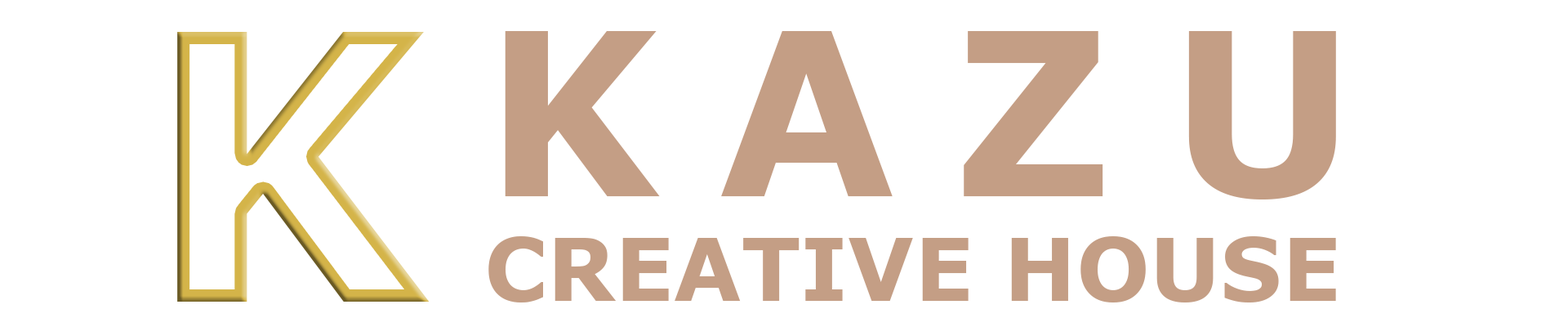
<style>
.page{position:relative;width:1568px;height:327px;background:#ffffff}
.page>*{position:absolute;margin:0}
.t1{font:370.9px "Verdana-Bold"}
.t2{font:86.8px "Verdana-Bold";color:#c49e85}
.t3{font:227.3px "Verdana-Bold";letter-spacing:0.26em;color:#c49e85}
</style>
<div class="page">
<p class="t1" style="left:177px;top:32px;width:253px;height:269px">K</p>
<p class="t2" style="left:488px;top:31px;width:848px;height:271px"><span class="t3">KAZU<br></span>CREATIVE HOUSE</p>
</div>
